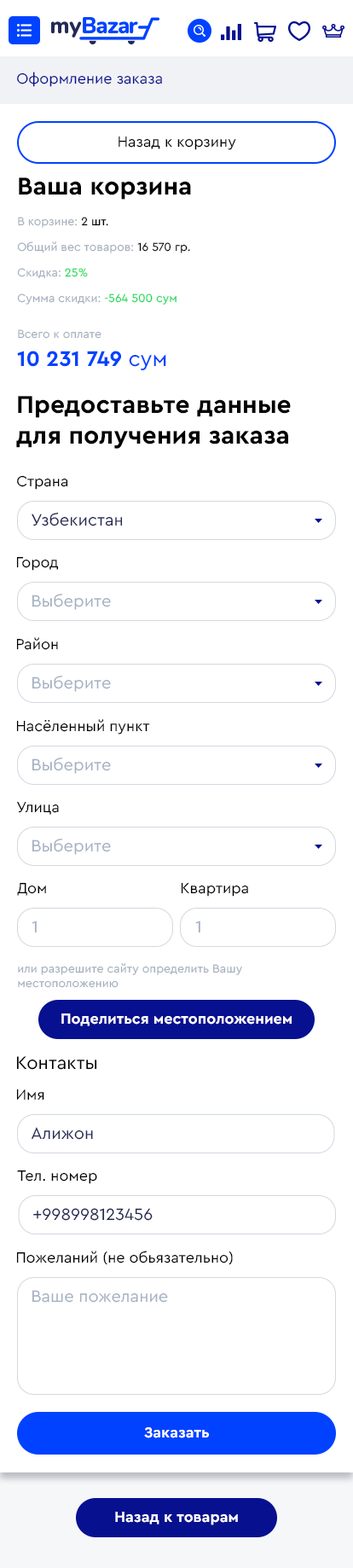
<style>
.page{position:relative;width:353px;height:1568px;background:#ffffff}
.page>*{position:absolute;margin:0}
.t1{font:15.4px "CeraPro-Regular";color:#07108f}
.t2{font:15.4px "CeraPro-Regular";color:#000000}
.t3{font:25.6px "CeraPro-Bold";color:#000000}
.t4{font:11.9px/25.6px "CeraPro-Regular";color:#a4b0be}
.t5{font:11.9px/25.6px "CeraPro-Regular";color:#000000}
.t6{font:11.9px/25.6px "CeraPro-Regular";color:#11da53}
.t7{font:11.9px "CeraPro-Regular";color:#a4b0be}
.t8{font:22.2px "CeraPro-Bold";color:#0042ff}
.t9{font:22.2px "CeraPro-Regular";color:#0042ff}
.t10{font:17.1px "CeraPro-Regular";color:#242954}
.t11{font:17.1px "CeraPro-Regular";color:#a5b1c2}
.t12{font:12px "CeraPro-Regular";color:#a4b0be}
.t13{font:15.4px "CeraPro-Bold";color:#ffffff}
.t14{font:18.8px "CeraPro-Regular";color:#000000}
</style>
<div class="page">
<p class="t1" style="left:17px;top:72px;width:145px;height:15px">Оформление заказа</p>
<p class="t2" style="left:119px;top:136px;width:117px;height:14px">Назад к корзину</p>
<p class="t3" style="left:19px;top:177px;width:172px;height:23px">Ваша корзина</p>
<p class="t4" style="left:17px;top:217px;width:173px;height:88px">В корзине: <span class="t5">2 шт.<br></span>Общий вес товаров: <span class="t5">16 570 гр.<br></span>Скидка: <span class="t6">25%<br></span>Сумма скидки: <span class="t6">-564 500 сум</span></p>
<p class="t7" style="left:18px;top:329px;width:84px;height:10px">Всего к оплате</p>
<p class="t8" style="left:17px;top:351px;width:149px;height:20px">10 231 749 <span class="t9">сум</span></p>
<p class="t3" style="left:16px;top:396px;width:275px;height:53px">Предоставьте данные<br>для получения заказа</p>
<p class="t2" style="left:17px;top:475px;width:51px;height:15px">Страна</p>
<p class="t10" style="left:32px;top:512px;width:91px;height:14px">Узбекистан</p>
<p class="t2" style="left:16px;top:556px;width:43px;height:15px">Город</p>
<p class="t11" style="left:32px;top:593px;width:79px;height:17px">Выберите</p>
<p class="t2" style="left:16px;top:637px;width:42px;height:13px">Район</p>
<p class="t11" style="left:32px;top:675px;width:79px;height:17px">Выберите</p>
<p class="t2" style="left:16px;top:719px;width:134px;height:16px">Насёленный пункт</p>
<p class="t11" style="left:32px;top:757px;width:79px;height:17px">Выберите</p>
<p class="t2" style="left:17px;top:801px;width:42px;height:14px">Улица</p>
<p class="t11" style="left:32px;top:838px;width:79px;height:17px">Выберите</p>
<p class="t2" style="left:17px;top:882px;width:29px;height:14px">Дом</p>
<p class="t2" style="left:181px;top:882px;width:67px;height:15px">Квартира</p>
<p class="t11" style="left:32px;top:920px;width:5px;height:13px">1</p>
<p class="t11" style="left:195px;top:920px;width:5px;height:13px">1</p>
<p class="t12" style="left:18px;top:963px;width:224px;height:25px">или разрешите сайту определить Вашу<br>местоположению</p>
<p class="t13" style="left:61px;top:1013px;width:231px;height:13px">Поделиться местоположением</p>
<p class="t14" style="left:16px;top:1056px;width:81px;height:14px">Контакты</p>
<p class="t2" style="left:16px;top:1089px;width:28px;height:12px">Имя</p>
<p class="t10" style="left:32px;top:1127px;width:61px;height:13px">Алижон</p>
<p class="t2" style="left:17px;top:1170px;width:80px;height:14px">Тел. номер</p>
<p class="t10" style="left:33px;top:1208px;width:120px;height:13px">+998998123456</p>
<p class="t2" style="left:16px;top:1251px;width:217px;height:14px">Пожеланий (не обьязательно)</p>
<p class="t11" style="left:32px;top:1290px;width:136px;height:13px">Ваше пожелание</p>
<p class="t13" style="left:144px;top:1427px;width:65px;height:11px">Заказать</p>
<p class="t13" style="left:115px;top:1512px;width:123px;height:13px">Назад к товарам</p>
</div>
